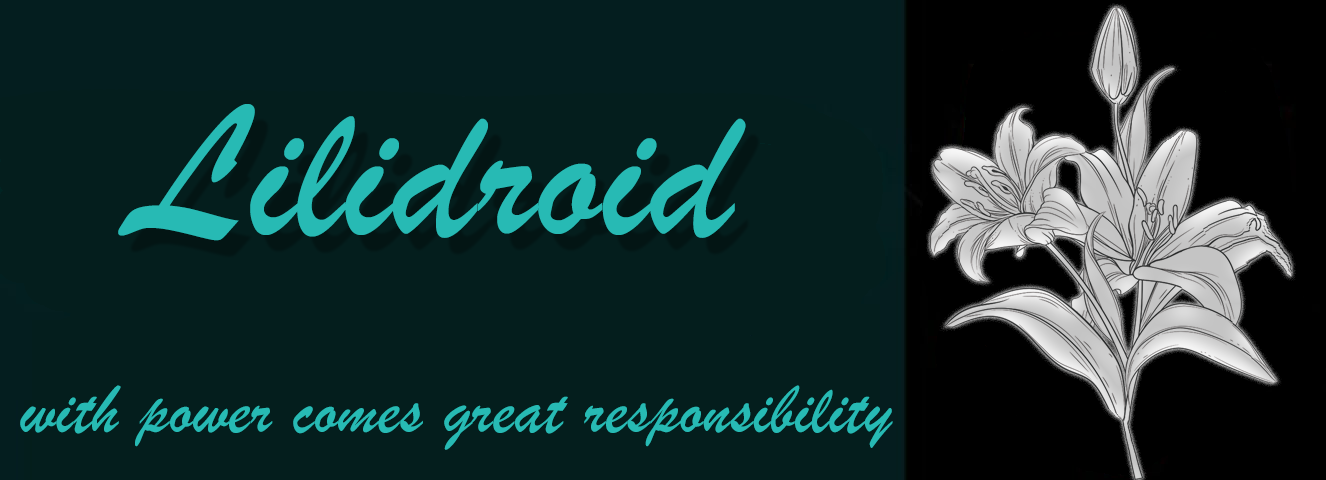
<style>
.page{position:relative;width:1326px;height:480px;background:#041e1d}
.page>*{position:absolute;margin:0}
.t1{font:200px "BrushScriptMT";letter-spacing:0.009em;color:#27bab4}
.t2{font:72px "BrushScriptMT";letter-spacing:0.009em;color:#27bab4}
</style>
<div class="page">
<p class="t1" style="left:118px;top:104px;width:628px;height:137px">Lilidroid</p>
<p class="t2" style="left:20px;top:385px;width:873px;height:65px">with power comes great responsibility</p>
</div>
